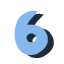
<style>
.page{position:relative;width:64px;height:64px;background:#ffffff}
.page>*{position:absolute;margin:0}
.t1{font:66px "Samba";color:#84b7eb}
.t2{font:66px "Samba"}
</style>
<div class="page">
<p class="t1" style="left:14px;top:10px;width:34px;height:45px">6</p>
<p class="t2" style="left:20px;top:13px;width:34px;height:45px">6</p>
</div>
